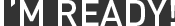
<style>
.page{position:relative;width:175px;height:26px;background:#333333}
.page>*{position:absolute;margin:0}
.t1{font:36px "DINPro-Medium";color:#ffffff}
</style>
<div class="page">
<p class="t1" style="left:0px;top:0px;width:175px;height:26px">I’M READY!</p>
</div>
